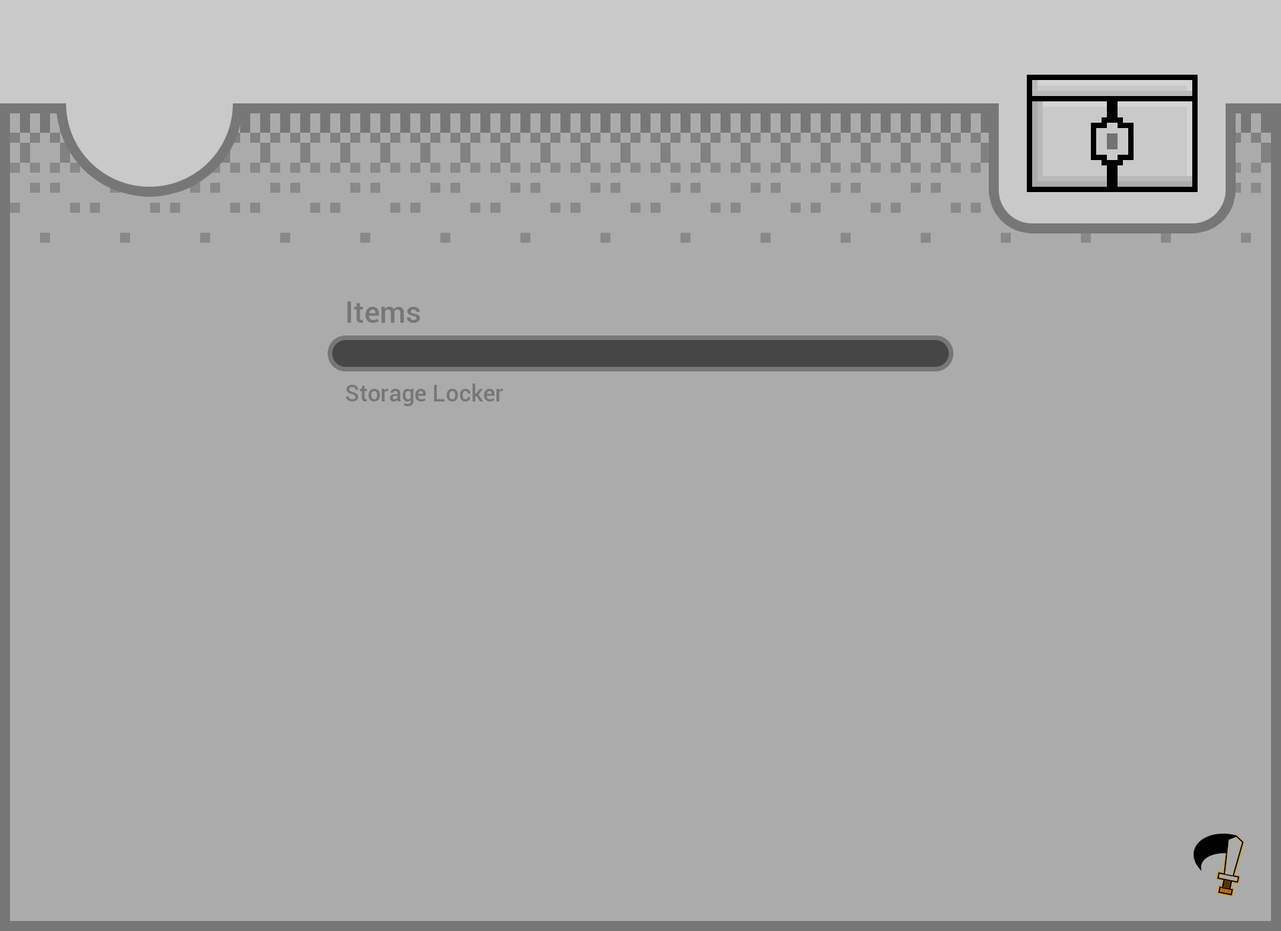
<style>
.page{position:relative;width:1281px;height:931px;background:#ababab}
.page>*{position:absolute;margin:0}
.t1{font:30px "Roboto-Medium";color:#777777}
.t2{font:23.3px "Roboto-Medium";color:#777777}
</style>
<div class="page">
<p class="t1" style="left:347px;top:301px;width:73px;height:22px">Items</p>
<p class="t2" style="left:346px;top:384px;width:157px;height:22px">Storage Locker</p>
</div>
